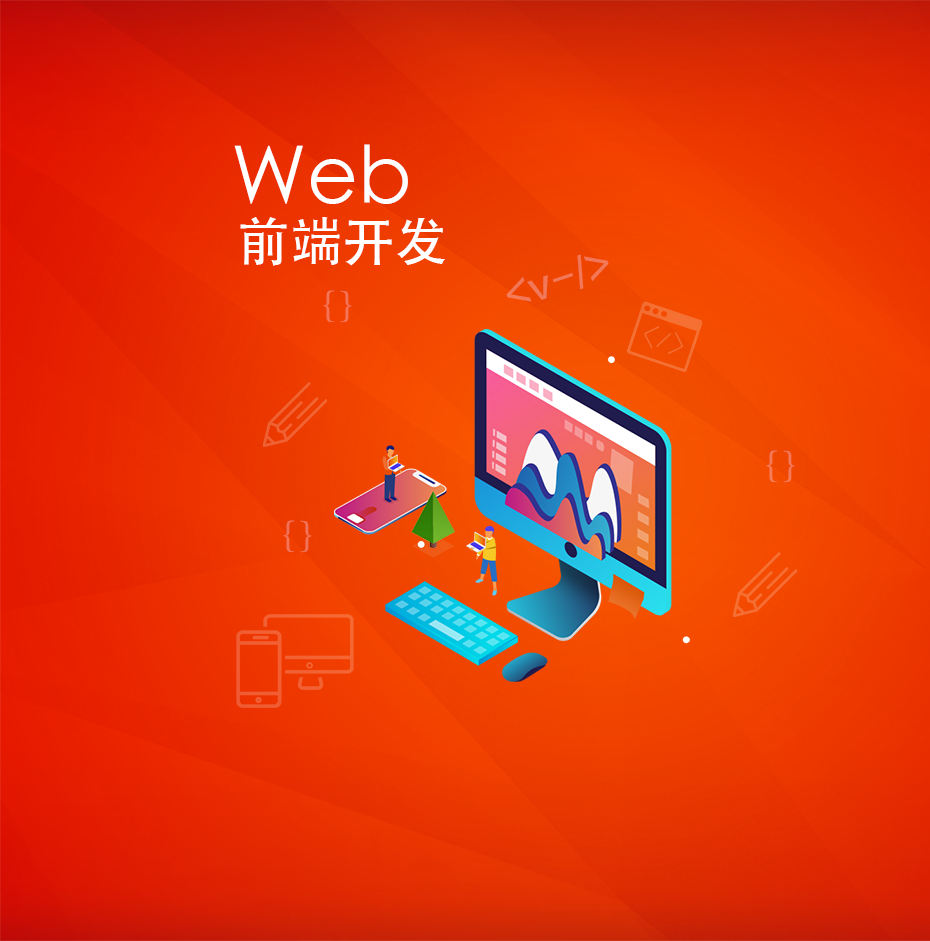
<style>
.page{position:relative;width:930px;height:941px}
.page>*{position:absolute;margin:0}
.t1{font:78.7px "STHeiti";color:#ffffff}
.t2{font:52.5px "STHeiti";color:#ffffff}
.t3{font:37.5px "FZLTZHK--GBK1-0";color:#f17858}
.t4{font:37.5px "SIL-Kai-Reg-Jian";color:#f47458}
.t5{font:37.5px "SIL-Kai-Reg-Jian";color:#f37958}
.t6{font:37.5px "SIL-Kai-Reg-Jian";color:#f17358}
</style>
<div class="page">
<p class="t1" style="left:234px;top:144px;width:174px;height:60px">Web</p>
<p class="t2" style="left:240px;top:217px;width:205px;height:49px">前端开发</p>
<p class="t3" style="left:506px;top:254px;width:103px;height:48px;rotate:-18deg">&lt;v-/&gt;</p>
<p class="t4" style="left:323px;top:290px;width:29px;height:33px">{}</p>
<p class="t5" style="left:766px;top:450px;width:29px;height:33px">{}</p>
<p class="t6" style="left:283px;top:520px;width:29px;height:33px">{}</p>
</div>
